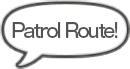
<style>
.page{position:relative;width:130px;height:69px;background:#ffffff}
.page>*{position:absolute;margin:0}
.t1{font:19px "GothicMB101Pro-Medium";letter-spacing:-0.08em;color:#525353;scale:0.9 1}
</style>
<div class="page">
<p class="t1" style="left:12px;top:22px;width:106px;height:16px">Patrol Route!</p>
</div>
